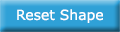
<style>
.page{position:relative;width:120px;height:32px;background:#2fa1d7}
.page>*{position:absolute;margin:0}
.t1{font:14px "Verdana";color:#ffffff}
</style>
<div class="page">
<p class="t1" style="left:17px;top:9px;width:86px;height:14px">Reset Shape</p>
</div>
